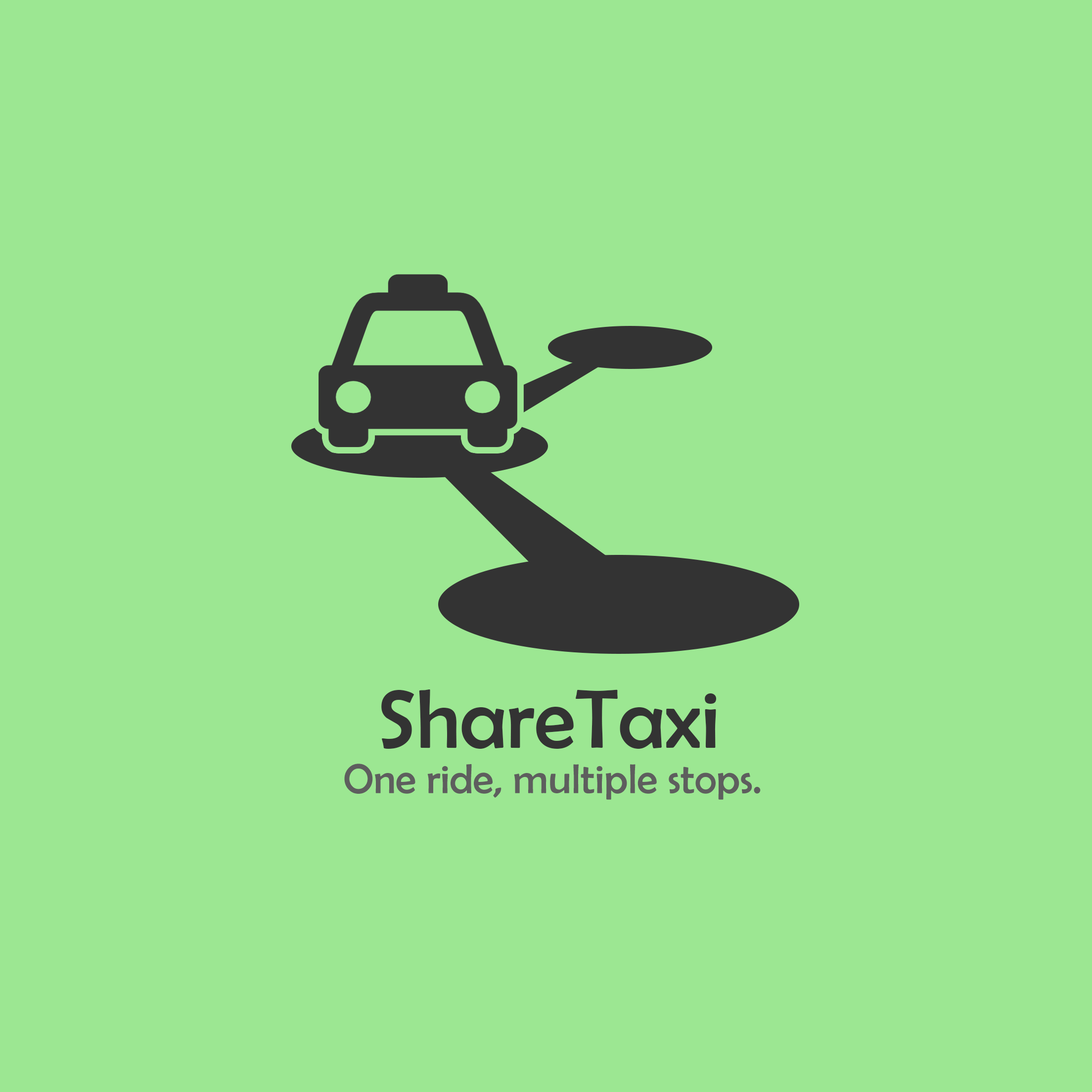
<style>
.page{position:relative;width:1092px;height:1092px;background:#9ce792}
.page>*{position:absolute;margin:0}
.t1{font:84.1px "BerlinSansFB-Reg";color:#333333}
.t2{font:42px "BerlinSansFB-Reg";color:#5e5e5e}
</style>
<div class="page">
<p class="t1" style="left:381px;top:689px;width:336px;height:60px">ShareTaxi</p>
<p class="t2" style="left:344px;top:764px;width:417px;height:36px">One ride, multiple stops.</p>
</div>
